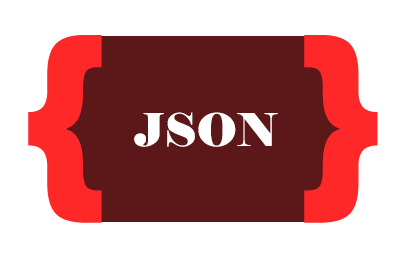
<style>
.page{position:relative;width:400px;height:262px;background:#ffffff}
.page>*{position:absolute;margin:0}
.t1{font:200px "GillSans-UltraBold";color:#ff2828}
.t2{font:45px "Elephant-Regular";color:#ffffff}
</style>
<div class="page">
<p class="t1" style="left:28px;top:35px;width:350px;height:188px">{   }</p>
<p class="t2" style="left:134px;top:112px;width:144px;height:35px">JSON</p>
</div>
